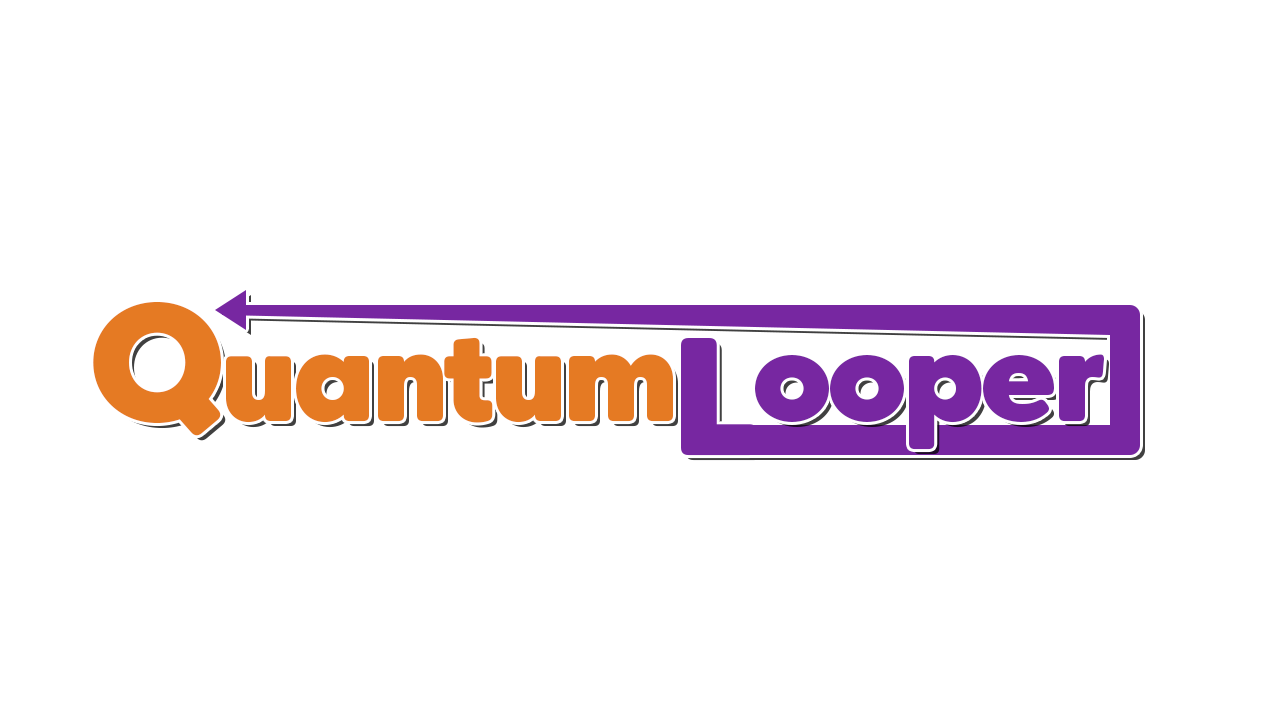
<style>
.page{position:relative;width:1280px;height:720px;background:#ffffff}
.page>*{position:absolute;margin:0}
.t1{font:125px "CarosSoftBlack";letter-spacing:-0.04em;color:#e57a23}
.t2{font:166.7px "CarosSoftBlack";letter-spacing:-0.04em;color:#e57a23}
.t3{font:125px "CarosSoftBlack";letter-spacing:0.58em;color:#e57a23}
.t4{font:125px "CarosSoftBlack";letter-spacing:-0.04em;color:#7727a1}
</style>
<div class="page">
<p class="t1" style="left:93px;top:301px;width:1011px;height:149px"><span class="t2">Q</span>uantu<span class="t3">m</span><span class="t4">ooper</span></p>
</div>
